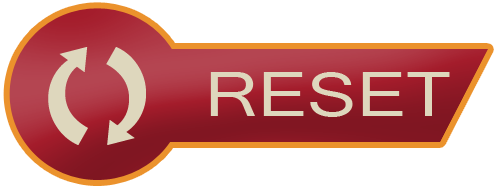
<style>
.page{position:relative;width:495px;height:190px;background:#ffffff}
.page>*{position:absolute;margin:0}
.t1{font:66.8px "Shruti";color:#ded7bd;scale:1.19 1}
</style>
<div class="page">
<p class="t1" style="left:210px;top:72px;width:240px;height:45px">RESET</p>
</div>
